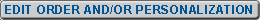
<style>
.page{position:relative;width:260px;height:20px;background:#cccccc}
.page>*{position:absolute;margin:0}
.t1{font:12px "Arial-BoldMT";letter-spacing:0.06em;color:#005596}
</style>
<div class="page">
<p class="t1" style="left:5px;top:5px;width:247px;height:9px">EDIT ORDER AND/OR PERSONALIZATION</p>
</div>
